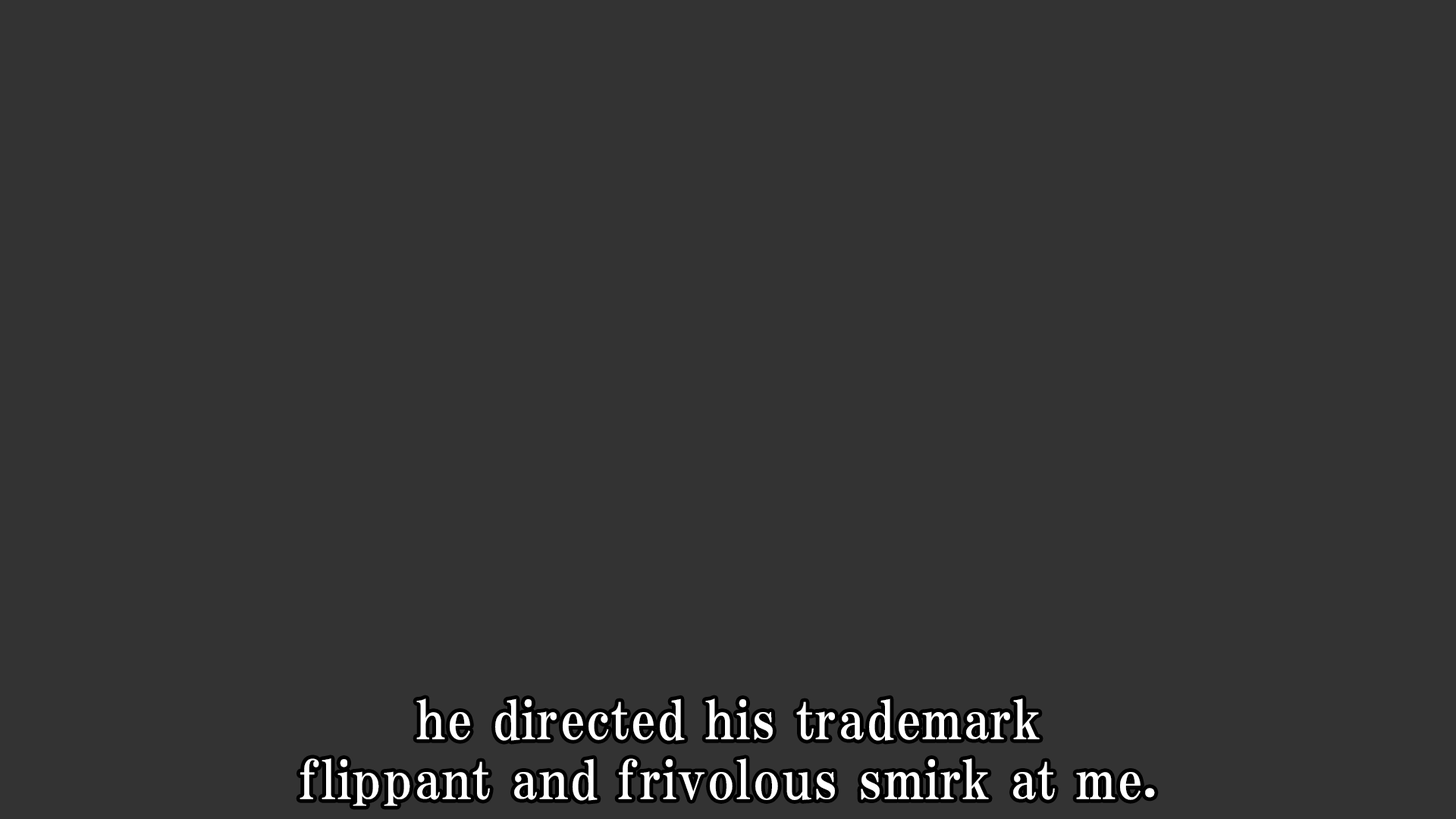
<style>
.page{position:relative;width:1456px;height:819px;background:#333333}
.page>*{position:absolute;margin:0}
.t1{font:53.1px/59.9px "HGPMinchoE";letter-spacing:0.025em;color:#ffffff}
</style>
<div class="page">
<p class="t1" style="left:300px;top:698px;width:855px;height:108px;text-align:center">he directed his trademark<br>flippant and frivolous smirk at me.</p>
</div>
